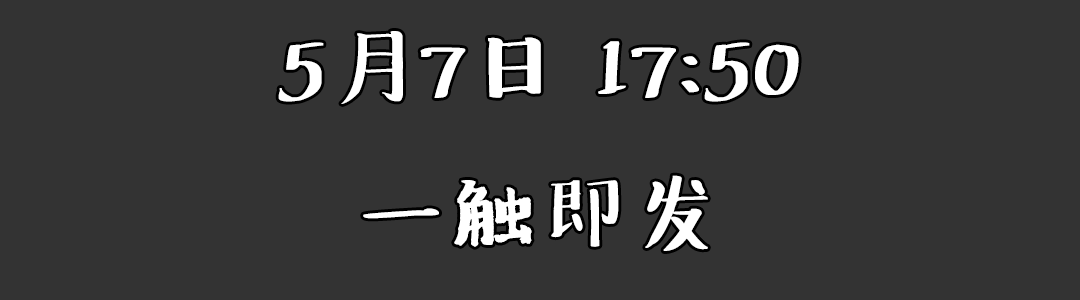
<style>
.page{position:relative;width:1080px;height:300px;background:#333333}
.page>*{position:absolute;margin:0}
.t1{font:83.3px "Undefined";color:#ffffff;font-weight:bold}
</style>
<div class="page">
<p class="t1" style="left:278px;top:31px;width:521px;height:220px;text-align:center">5月7日 17:50<br>一触即发</p>
</div>
